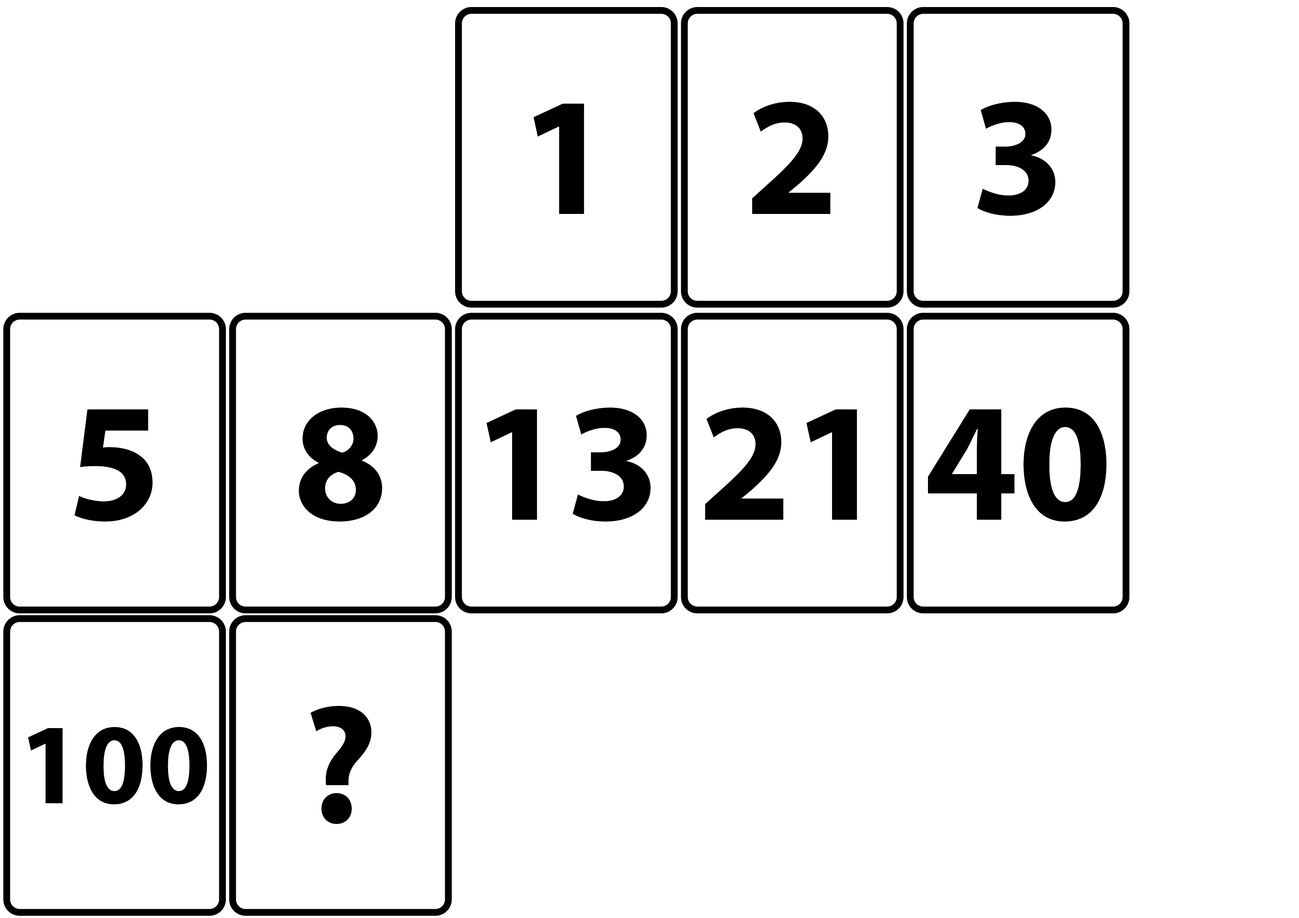
<style>
.page{position:relative;width:1299px;height:918px;background:#ffffff}
.page>*{position:absolute;margin:0}
.t1{font:169.7px "MyriadPro-Bold";color:#000000}
.t2{font:115.7px "MyriadPro-Bold";color:#000000}
</style>
<div class="page">
<p class="t1" style="left:752px;top:101px;width:78px;height:113px">2</p>
<p class="t1" style="left:977px;top:102px;width:78px;height:114px">3</p>
<p class="t1" style="left:533px;top:104px;width:51px;height:110px">1</p>
<p class="t1" style="left:74px;top:409px;width:79px;height:113px">5</p>
<p class="t1" style="left:299px;top:408px;width:83px;height:114px">8</p>
<p class="t1" style="left:486px;top:408px;width:164px;height:114px">13</p>
<p class="t1" style="left:705px;top:407px;width:152px;height:113px">21</p>
<p class="t1" style="left:928px;top:408px;width:178px;height:114px">40</p>
<p class="t1" style="left:310px;top:706px;width:61px;height:118px">?</p>
<p class="t2" style="left:28px;top:727px;width:179px;height:77px">100</p>
</div>
